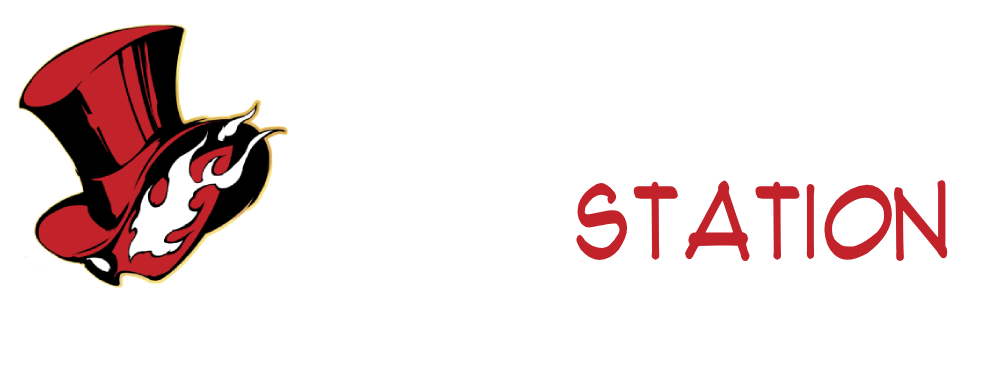
<style>
.page{position:relative;width:994px;height:373px;background:#ffffff}
.page>*{position:absolute;margin:0}
.t1{font:104px "Flux-Architect";color:#c2222a;scale:0.81 1}
</style>
<div class="page">
<p class="t1" style="left:576px;top:180px;width:372px;height:82px">Station</p>
</div>
